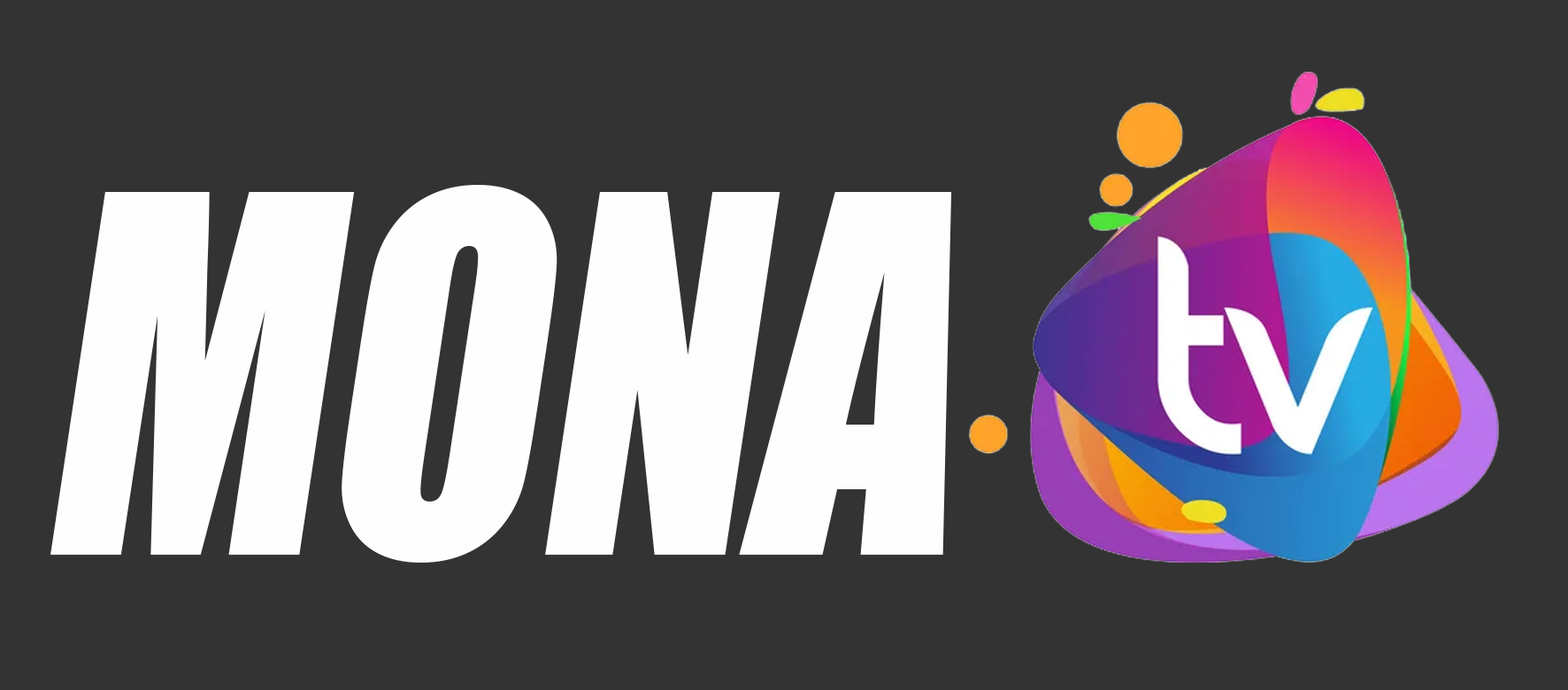
<style>
.page{position:relative;width:1568px;height:690px;background:#333333}
.page>*{position:absolute;margin:0}
.t1{font:457.9px "Impact";color:#fefeff;font-style:italic;scale:0.86 1}
</style>
<div class="page">
<p class="t1" style="left:50px;top:185px;width:902px;height:378px">MONA</p>
</div>
